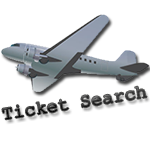
<style>
.page{position:relative;width:150px;height:150px;background:#ffffff}
.page>*{position:absolute;margin:0}
.t1{font:18.8px "CourierNewPSMT"}
</style>
<div class="page">
<p class="t1" style="left:2px;top:86px;width:145px;height:34px;rotate:-9deg">Ticket Search</p>
</div>
